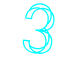
<style>
.page{position:relative;width:60px;height:60px;background:#ffffff}
.page>*{position:absolute;margin:0}
.t1{font:80px "Finity";letter-spacing:0.04em;color:#00fcff}
</style>
<div class="page">
<p class="t1" style="left:22px;top:3px;width:33px;height:51px;rotate:6deg">3</p>
</div>
